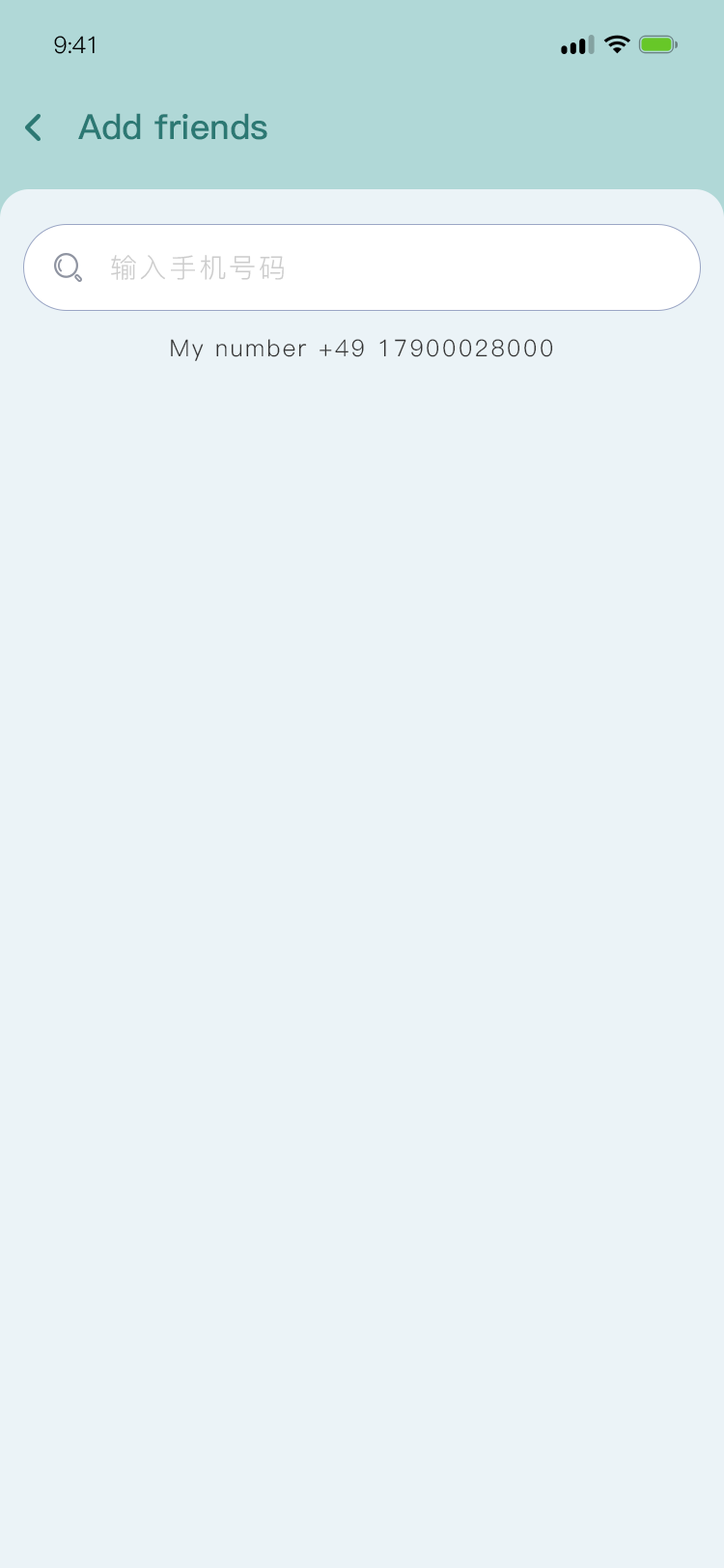
<style>
.page{position:relative;width:724px;height:1568px;background:#ebf3f7}
.page>*{position:absolute;margin:0}
.t1{font:23.2px "PingFang-SC-Regular";letter-spacing:-0.025em;color:#000000}
.t2{font:34.8px "PingFang-SC-Bold";color:#2c7873}
.t3{font:27px "PingFang-SC-Regular";letter-spacing:0.1em;color:#cccccc}
.t4{font:23.2px "PingFang-SC-Regular";letter-spacing:0.1em;color:#333333}
</style>
<div class="page">
<p class="t1" style="left:54px;top:36px;width:41px;height:18px">9:41</p>
<p class="t2" style="left:78px;top:113px;width:189px;height:27px">Add friends</p>
<p class="t3" style="left:111px;top:255px;width:173px;height:25px">输入手机号码</p>
<p class="t4" style="left:171px;top:339px;width:382px;height:22px">My number +49 17900028000</p>
</div>
